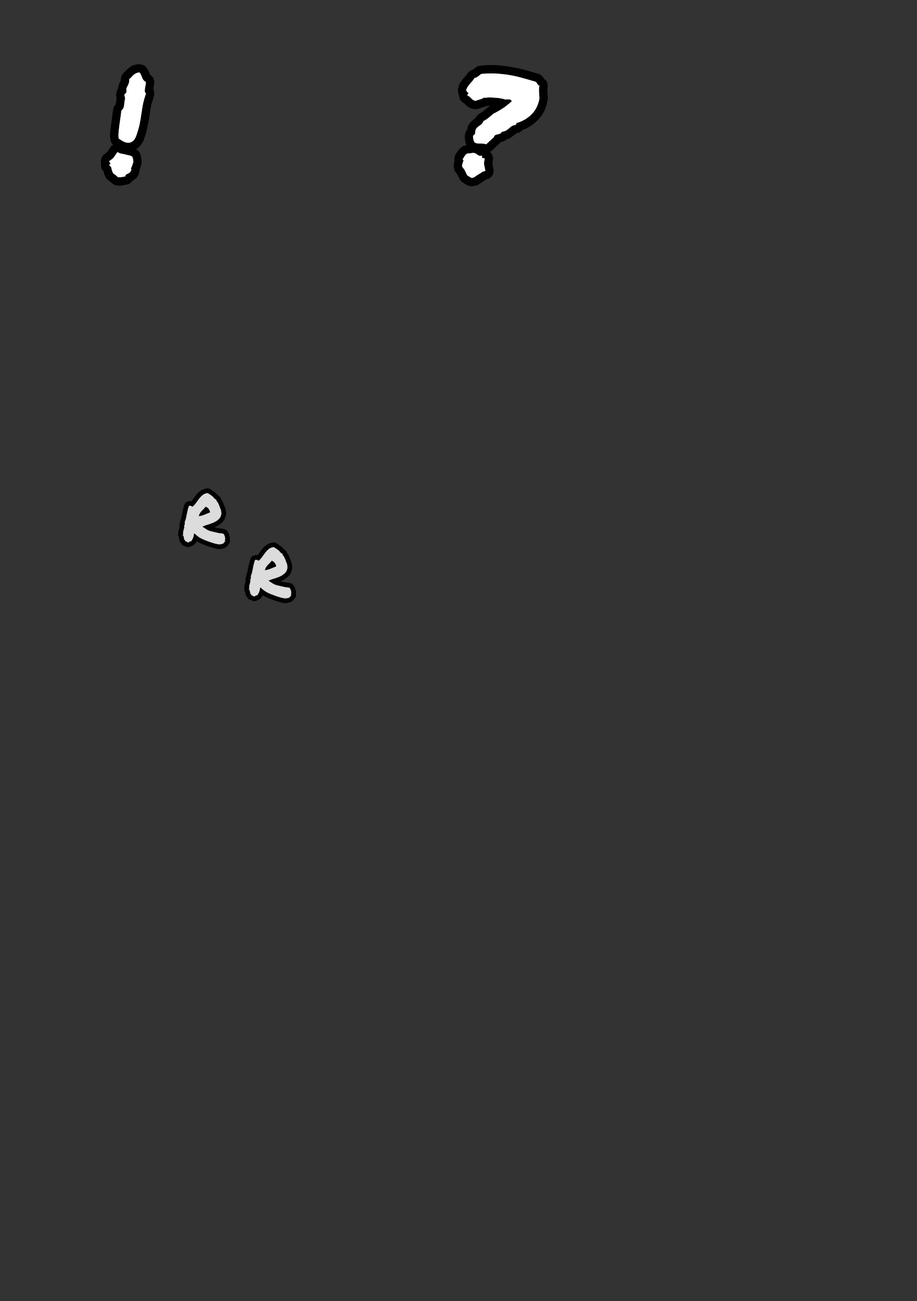
<style>
.page{position:relative;width:917px;height:1301px;background:#333333}
.page>*{position:absolute;margin:0}
.t1{font:136.6px "PermanentMarker-Regular";letter-spacing:-0.04em;color:#ffffff}
.t2{font:66.7px/53.9px "PermanentMarker-Regular";letter-spacing:-0.04em;color:#e3e3e3}
</style>
<div class="page">
<p class="t1" style="left:109px;top:72px;width:431px;height:106px">!       ?</p>
<p class="t2" style="left:183px;top:492px;width:109px;height:106px;text-align:center;opacity:0.96">R<br>      R</p>
</div>
